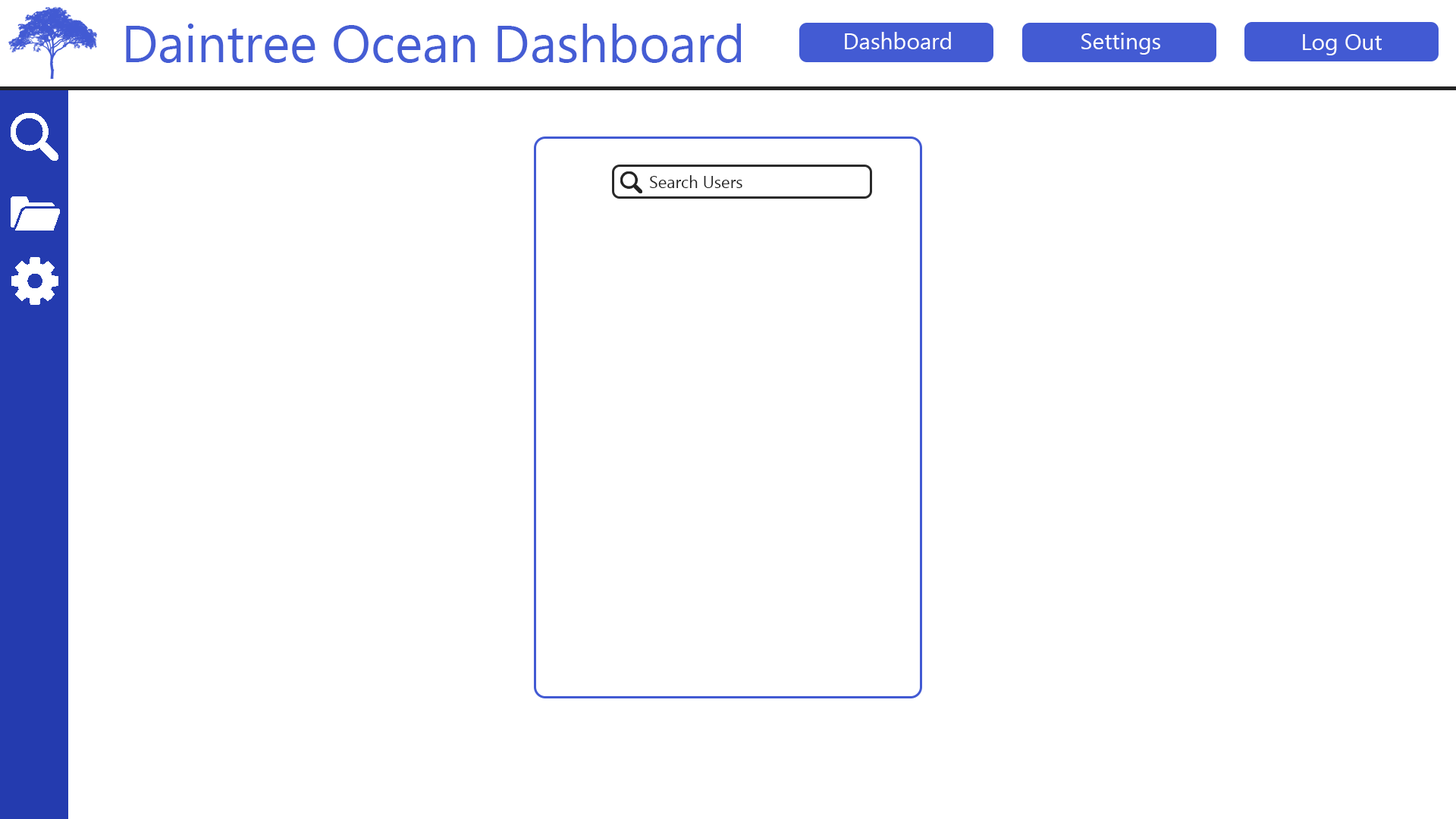
<style>
.page{position:relative;width:1456px;height:819px;background:#ffffff}
.page>*{position:absolute;margin:0}
.t1{font:52.3px "MyanmarText";color:#455dd4}
.t2{font:22.7px "MyanmarText";color:#ffffff}
.t3{font:16.7px "MyanmarText";color:#232323}
</style>
<div class="page">
<p class="t1" style="left:126px;top:24px;width:615px;height:39px">Daintree Ocean Dashboard</p>
<p class="t2" style="left:845px;top:32px;width:106px;height:17px">Dashboard</p>
<p class="t2" style="left:1081px;top:33px;width:79px;height:22px">Settings</p>
<p class="t2" style="left:1303px;top:34px;width:79px;height:21px">Log Out</p>
<p class="t3" style="left:650px;top:175px;width:92px;height:13px">Search Users</p>
</div>
